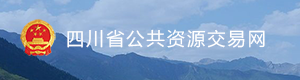
<style>
.page{position:relative;width:300px;height:80px}
.page>*{position:absolute;margin:0}
.t1{font:18.4px "MicrosoftYaHei";letter-spacing:0.1em;color:#ffffff}
</style>
<div class="page">
<p class="t1" style="left:67px;top:29px;width:198px;height:19px">四川省公共资源交易网</p>
</div>
